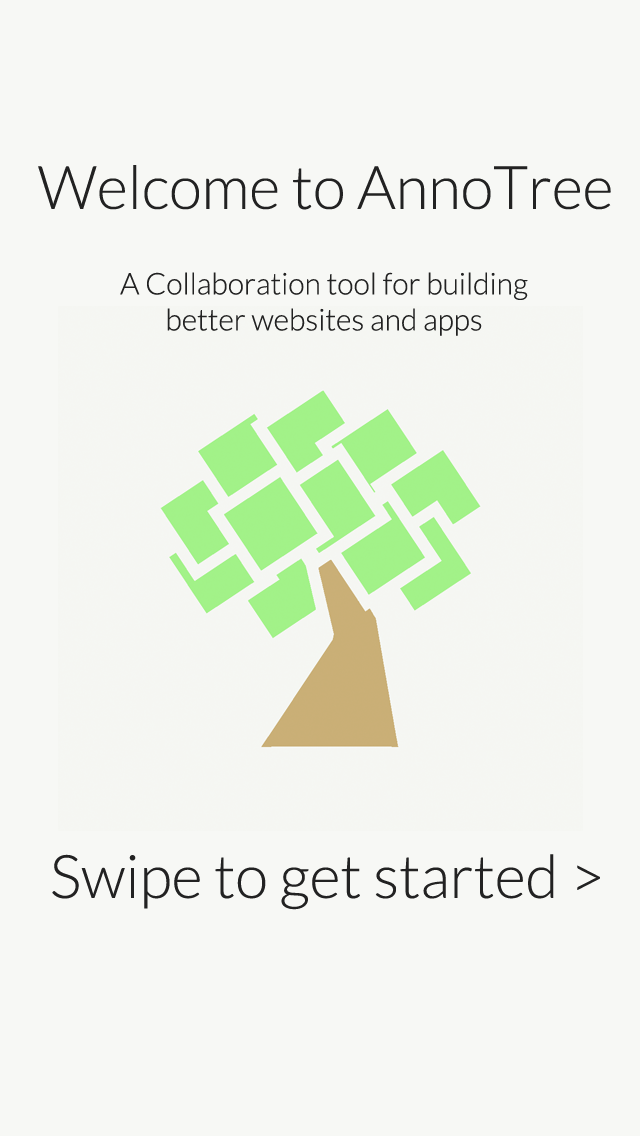
<style>
.page{position:relative;width:640px;height:1136px;background:#f7f8f5}
.page>*{position:absolute;margin:0}
.t1{font:60px "Lato-Light";color:#222222}
.t2{font:30px "Lato-Light";color:#222222}
</style>
<div class="page">
<p class="t1" style="left:38px;top:165px;width:573px;height:45px">Welcome to AnnoTree</p>
<p class="t2" style="left:120px;top:272px;width:408px;height:64px;text-align:center">A Collaboration tool for building<br>better websites and apps</p>
<p class="t1" style="left:52px;top:854px;width:548px;height:56px">Swipe to get started &gt;</p>
</div>
